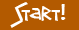
<style>
.page{position:relative;width:79px;height:30px;background:#b35a00}
.page>*{position:absolute;margin:0}
.t1{font:30px "Screwball";color:#ffffff}
</style>
<div class="page">
<p class="t1" style="left:10px;top:2px;width:56px;height:26px">Start!</p>
</div>
